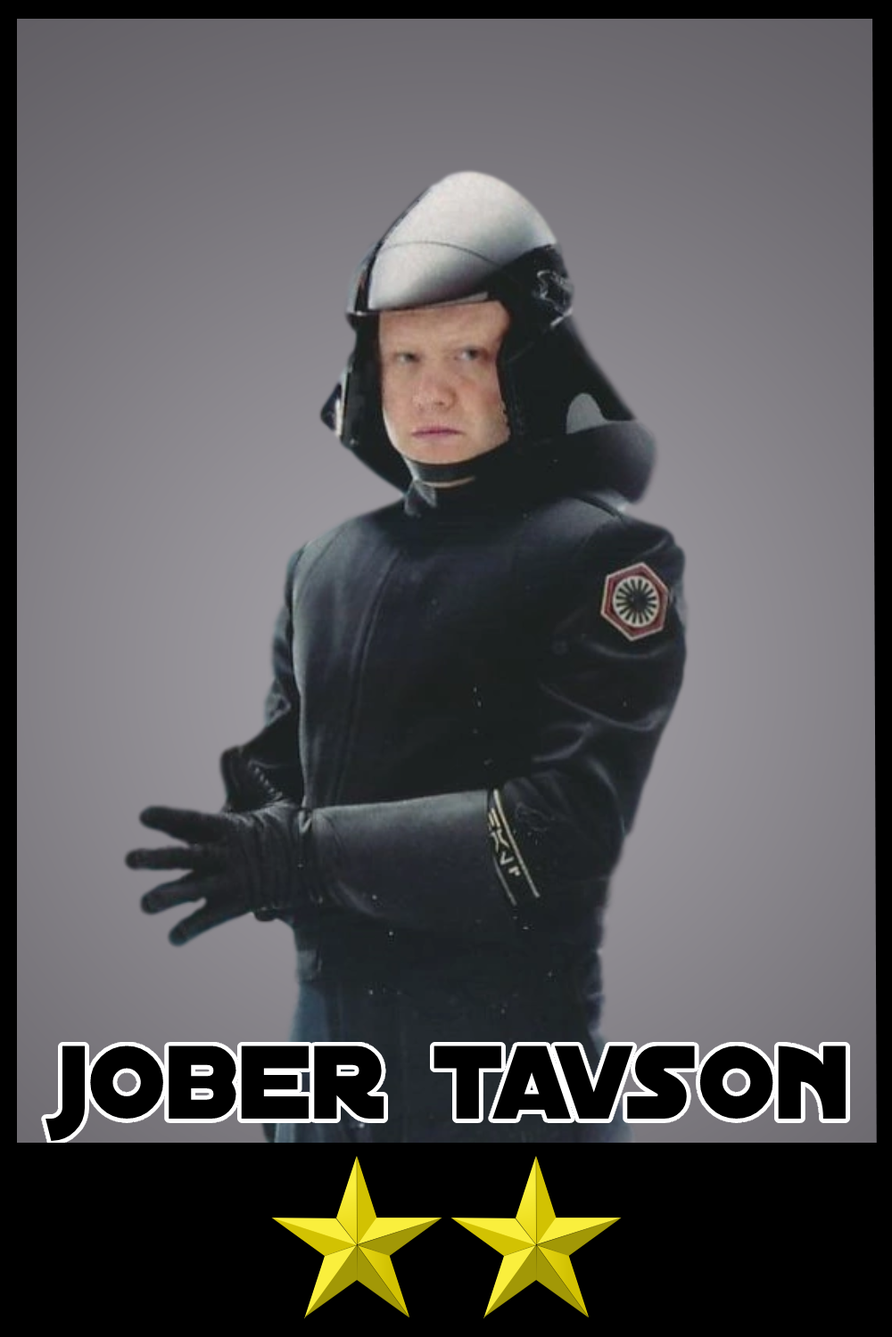
<style>
.page{position:relative;width:892px;height:1337px}
.page>*{position:absolute;margin:0}
.t1{font:111.9px "DistantGalaxy";color:#000000}
</style>
<div class="page">
<p class="t1" style="left:45px;top:1046px;width:800px;height:95px">jober tavson</p>
</div>
